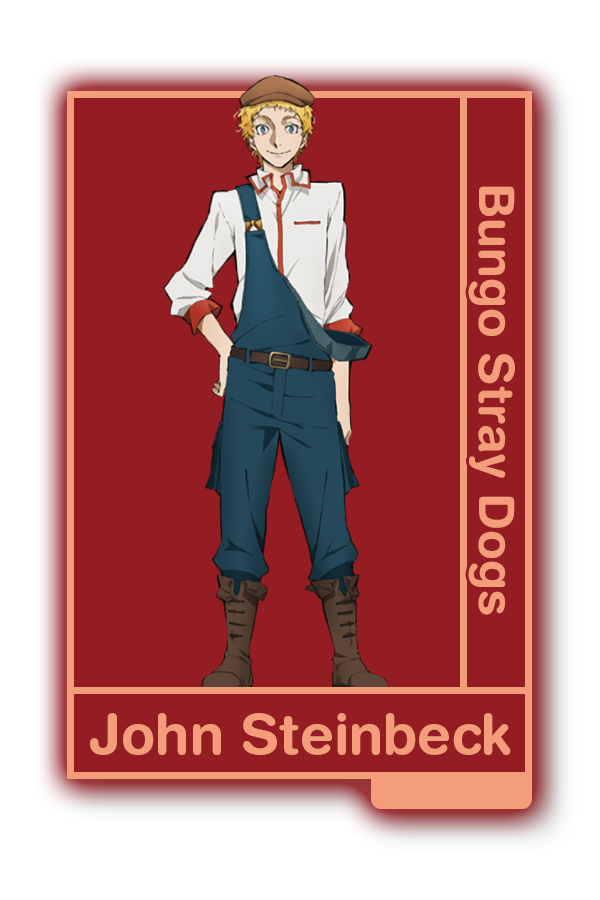
<style>
.page{position:relative;width:600px;height:900px;background:#941d23}
.page>*{position:absolute;margin:0}
.t1{font:48.8px "HelveticaRounded-Bold";color:#f39d7b}
.t2{font:55.8px "HelveticaRounded-Bold";color:#f39d7b}
</style>
<div class="page">
<p class="t1" style="left:468px;top:186px;width:47px;height:429px;rotate:90deg">Bungo Stray Dogs</p>
<p class="t2" style="left:90px;top:713px;width:421px;height:42px">John Steinbeck</p>
</div>
